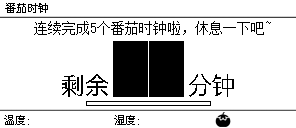
<style>
.page{position:relative;width:296px;height:128px;background:#ffffff}
.page>*{position:absolute;margin:0}
.t1{font:11px "OPPOSans-R";color:#000000}
.t2{font:14px "SimSun";color:#000000}
.t3{font:24px "OPPOSans-R";color:#000000}
</style>
<div class="page">
<p class="t1" style="left:5px;top:3px;width:43px;height:10px">番茄时钟</p>
<p class="t2" style="left:34px;top:21px;width:237px;height:14px">连续完成5个番茄时钟啦，休息一下吧~</p>
<p class="t3" style="left:62px;top:74px;width:46px;height:23px">剩余</p>
<p class="t3" style="left:189px;top:74px;width:45px;height:23px">分钟</p>
<p class="t1" style="left:4px;top:115px;width:25px;height:10px">温度：</p>
<p class="t1" style="left:114px;top:115px;width:25px;height:10px">湿度：</p>
</div>
